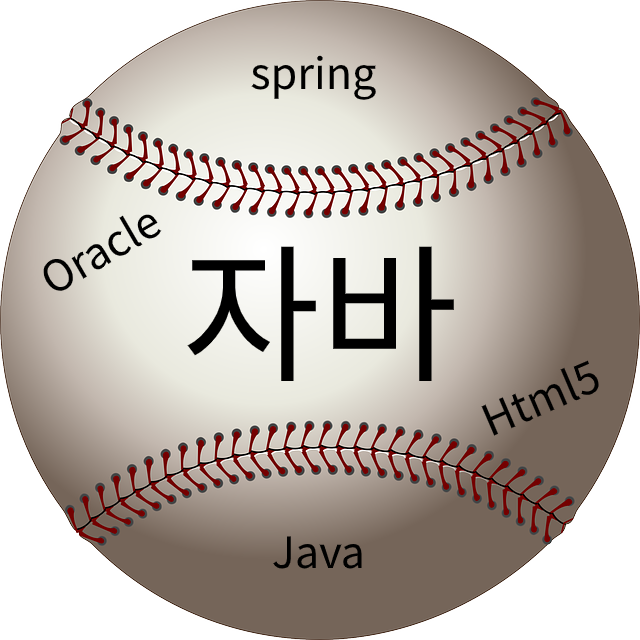
<style>
.page{position:relative;width:640px;height:640px;background:#ffffff}
.page>*{position:absolute;margin:0}
.t1{font:43px "NotoSansKR-Regular";color:#000000}
.t2{font:150px "NotoSansKR-Regular";color:#000000}
</style>
<div class="page">
<p class="t1" style="left:251px;top:55px;width:125px;height:45px">spring</p>
<p class="t1" style="left:43px;top:214px;width:119px;height:77px;rotate:-30deg">Oracle</p>
<p class="t2" style="left:187px;top:246px;width:267px;height:136px">자바</p>
<p class="t1" style="left:481px;top:360px;width:118px;height:76px;rotate:-23deg">Html5</p>
<p class="t1" style="left:273px;top:536px;width:89px;height:33px">Java</p>
</div>
